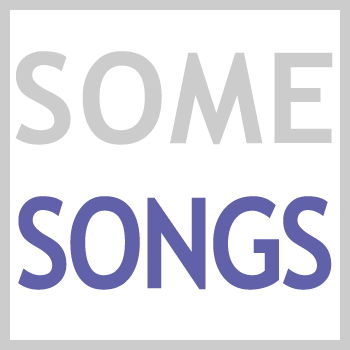
<style>
.page{position:relative;width:350px;height:350px;background:#ffffff}
.page>*{position:absolute;margin:0}
.t1{font:126px "TrebuchetMS-Bold";letter-spacing:0.02em;color:#cccccc}
.t2{font:126px "TrebuchetMS-Bold";letter-spacing:-0.04em;color:#6060aa;scale:0.88 1}
</style>
<div class="page">
<p class="t1" style="left:15px;top:51px;width:318px;height:94px">SOME</p>
<p class="t2" style="left:18px;top:196px;width:314px;height:94px">SONGS</p>
</div>
